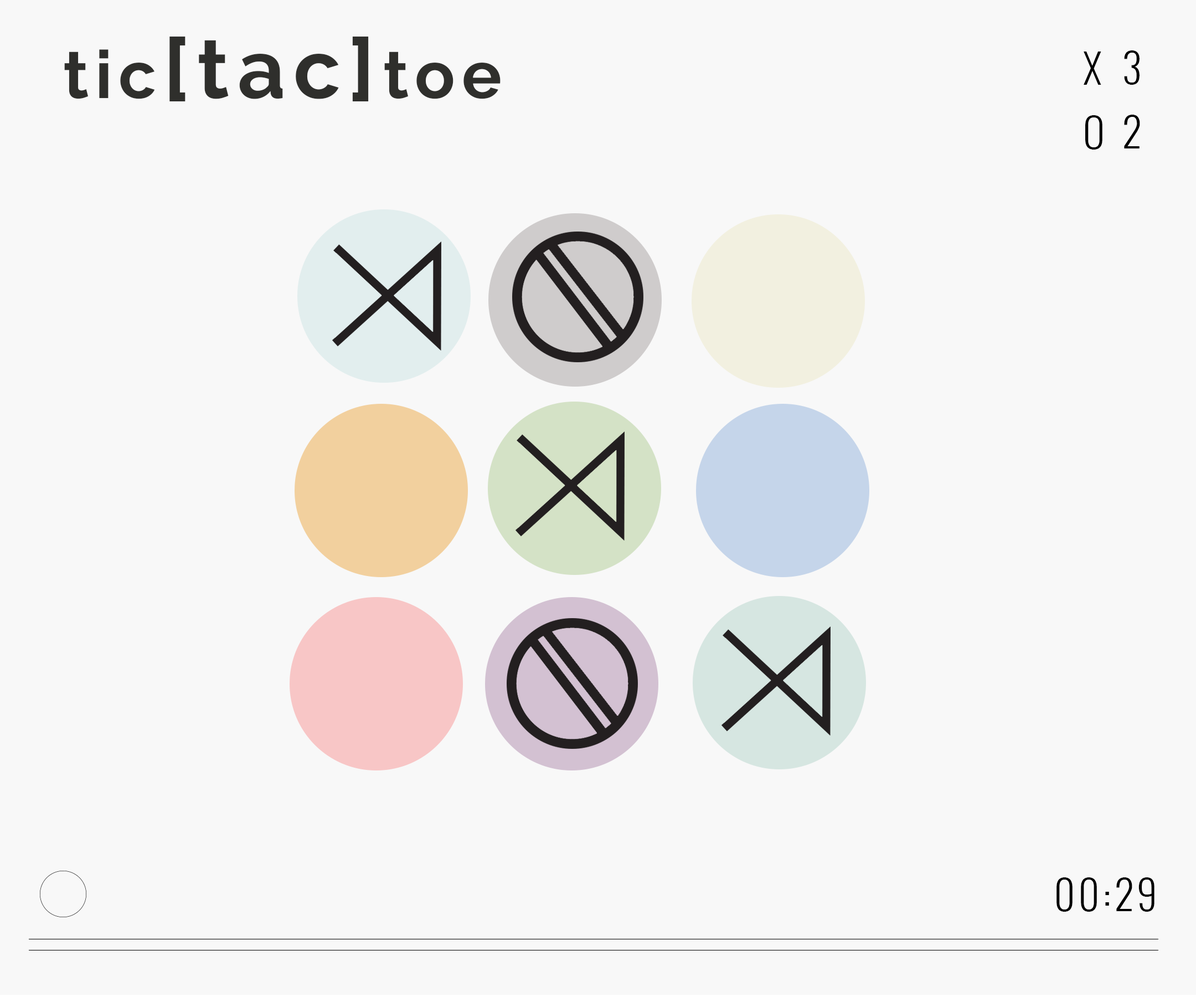
<style>
.page{position:relative;width:1196px;height:997px;background:#f8f8f8}
.page>*{position:absolute;margin:0}
.t1{font:83px "Raleway-Bold";letter-spacing:0.1em;color:#2f2f2c}
.t2{font:66.5px "Raleway-Bold";letter-spacing:0.1em;color:#2f2f2c}
.t3{font:39.9px/32.1px "Oswald-Light";letter-spacing:0.1em;color:#000000}
.t4{font:39.9px "Oswald-Light";letter-spacing:0.1em;color:#000000}
</style>
<div class="page">
<p class="t1" style="left:64px;top:37px;width:437px;height:64px"><span class="t2">tic</span>[tac]<span class="t2">toe</span></p>
<p class="t3" style="left:1084px;top:52px;width:19px;height:98px">X<br><br>O</p>
<p class="t3" style="left:1124px;top:50px;width:16px;height:98px">3<br><br>2</p>
<p class="t4" style="left:1057px;top:877px;width:98px;height:35px">00:29</p>
</div>
